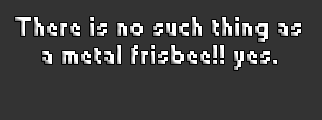
<style>
.page{position:relative;width:322px;height:120px;background:#333333}
.page>*{position:absolute;margin:0}
.t1{font:24px/28px "Small Fonts";font-weight:bold}
</style>
<div class="page">
<p class="t1" style="left:15px;top:17px;width:286px;height:53px;text-align:center">There is no such thing as<br>a metal frisbee!! yes.</p>
</div>
